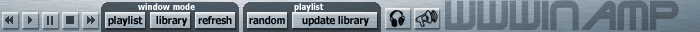
<style>
.page{position:relative;width:700px;height:32px}
.page>*{position:absolute;margin:0}
.t1{font:9px "Tahoma-Bold";color:#ffffff;scale:0.9 1}
.t2{font:45px "TerminatorTwo";color:#5b6b76;scale:0.9 1}
.t3{font:10.5px "Tahoma-Bold";color:#000000;scale:0.9 1}
</style>
<div class="page">
<p class="t1" style="left:138px;top:3px;width:57px;height:7px">window mode</p>
<p class="t1" style="left:294px;top:3px;width:30px;height:9px">playlist</p>
<p class="t2" style="left:445px;top:0px;width:234px;height:31px">WWWinamp</p>
<p class="t3" style="left:108px;top:16px;width:124px;height:10px">playlist     library    refresh</p>
<p class="t3" style="left:249px;top:16px;width:120px;height:10px">random      update library</p>
</div>
